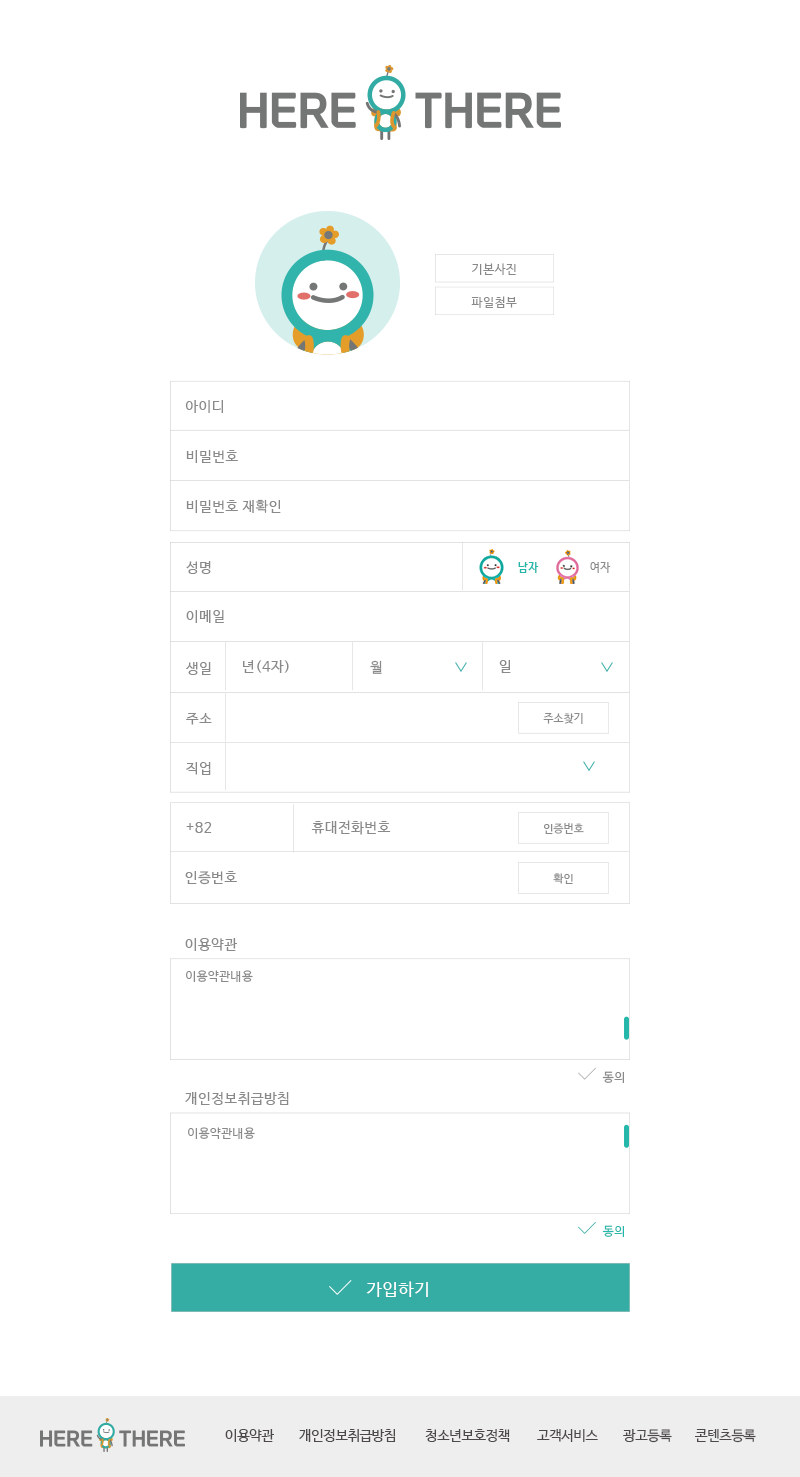
<style>
.page{position:relative;width:800px;height:1477px;background:#ffffff}
.page>*{position:absolute;margin:0}
.t1{font:12.4px "NanumBarunGothic";letter-spacing:0.025em;color:#898989}
.t2{font:14px "NanumBarunGothic";letter-spacing:0.05em;color:#898989}
.t3{font:11px "NanumBarunGothicBold";letter-spacing:0.05em;color:#25b7aa}
.t4{font:11px "NanumBarunGothic";letter-spacing:0.05em;color:#898989}
.t5{font:11px "NanumBarunGothic";letter-spacing:0.025em;color:#898989}
.t6{font:12px "NanumBarunGothic";letter-spacing:0.05em;color:#898989}
.t7{font:12px "NanumBarunGothic";letter-spacing:0.05em;color:#25b7aa}
.t8{font:17px "NanumBarunGothic";letter-spacing:0.05em;color:#ffffff}
.t9{font:14px "NanumBarunGothic";letter-spacing:-0.025em;color:#4c4948}
</style>
<div class="page">
<p class="t1" style="left:472px;top:263px;width:44px;height:12px">기본사진</p>
<p class="t1" style="left:471px;top:296px;width:46px;height:12px">파일첨부</p>
<p class="t2" style="left:185px;top:400px;width:38px;height:13px">아이디</p>
<p class="t2" style="left:186px;top:450px;width:52px;height:13px">비밀번호</p>
<p class="t2" style="left:186px;top:499px;width:95px;height:14px">비밀번호 재확인</p>
<p class="t2" style="left:186px;top:561px;width:25px;height:13px">성명</p>
<p class="t3" style="left:518px;top:562px;width:21px;height:11px">남자</p>
<p class="t4" style="left:590px;top:562px;width:21px;height:11px">여자</p>
<p class="t2" style="left:186px;top:610px;width:38px;height:13px">이메일</p>
<p class="t2" style="left:186px;top:662px;width:25px;height:13px">생일</p>
<p class="t2" style="left:243px;top:660px;width:46px;height:13px">년(4자)</p>
<p class="t2" style="left:370px;top:660px;width:12px;height:14px">월</p>
<p class="t2" style="left:499px;top:660px;width:12px;height:13px">일</p>
<p class="t2" style="left:186px;top:713px;width:26px;height:12px">주소</p>
<p class="t5" style="left:543px;top:713px;width:40px;height:11px">주소찾기</p>
<p class="t2" style="left:186px;top:762px;width:25px;height:13px">직업</p>
<p class="t2" style="left:186px;top:822px;width:26px;height:11px">+82</p>
<p class="t2" style="left:311px;top:820px;width:80px;height:15px">휴대전화번호</p>
<p class="t5" style="left:544px;top:823px;width:40px;height:11px">인증번호</p>
<p class="t2" style="left:185px;top:871px;width:52px;height:14px">인증번호</p>
<p class="t5" style="left:553px;top:873px;width:20px;height:11px">확인</p>
<p class="t2" style="left:185px;top:938px;width:52px;height:13px">이용약관</p>
<p class="t6" style="left:186px;top:970px;width:67px;height:12px">이용약관내용</p>
<p class="t6" style="left:602px;top:1071px;width:22px;height:12px">동의</p>
<p class="t2" style="left:185px;top:1092px;width:104px;height:13px">개인정보취급방침</p>
<p class="t6" style="left:188px;top:1127px;width:67px;height:12px">이용약관내용</p>
<p class="t7" style="left:602px;top:1225px;width:22px;height:12px">동의</p>
<p class="t8" style="left:366px;top:1281px;width:62px;height:16px">가입하기</p>
<p class="t9" style="left:225px;top:1429px;width:49px;height:13px">이용약관</p>
<p class="t9" style="left:299px;top:1429px;width:96px;height:13px">개인정보취급방침</p>
<p class="t9" style="left:425px;top:1429px;width:85px;height:13px">청소년보호정책</p>
<p class="t9" style="left:537px;top:1429px;width:61px;height:13px">고객서비스</p>
<p class="t9" style="left:623px;top:1429px;width:49px;height:14px">광고등록</p>
<p class="t9" style="left:695px;top:1429px;width:61px;height:14px">콘텐츠등록</p>
</div>
